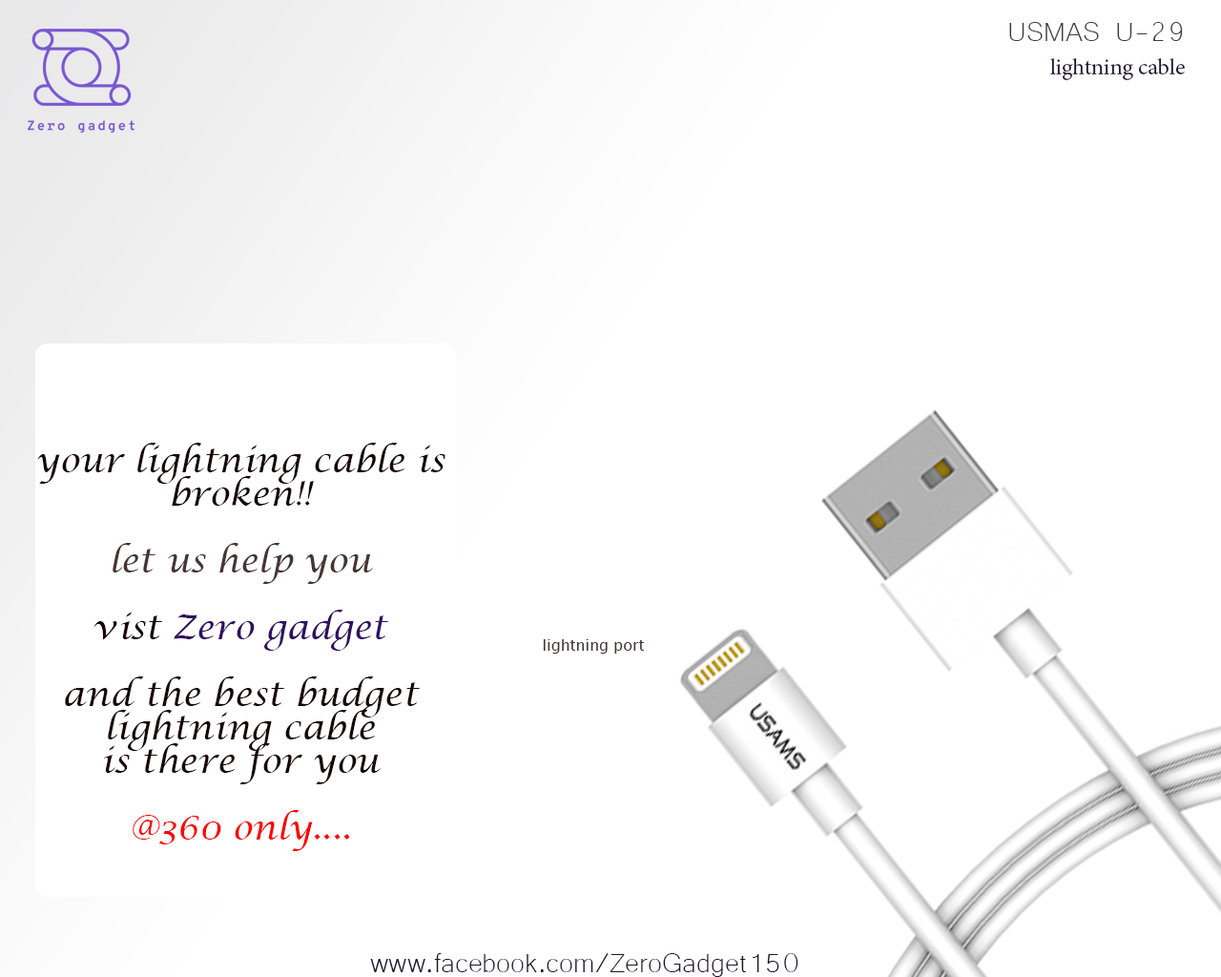
<style>
.page{position:relative;width:1221px;height:977px;background:#ffffff}
.page>*{position:absolute;margin:0}
.t1{font:22.9px/33.4px "MinionPro-Regular";color:#201431}
.t2{font:34.3px/33.4px "Microsoft-Yi-Baiti";color:#3e3d41}
.t3{font:34.3px/33.4px "LucidaCalligraphy-Italic";color:#170606}
.t4{font:34.3px/33.4px "LucidaCalligraphy-Italic";color:#463535}
.t5{font:34.3px/33.4px "LucidaCalligraphy-Italic";color:#310f5f}
.t6{font:34.3px/33.4px "LucidaCalligraphy-Italic";color:#ff0000}
.t7{font:15.3px "LucidaSansUnicode";color:#433535}
.t8{font:34.3px "Microsoft-Yi-Baiti";color:#201431}
</style>
<div class="page">
<p class="t1" style="left:1009px;top:22px;width:176px;height:58px;text-align:right"><span class="t2">USMAS U-29<br></span>lightning cable</p>
<p class="t3" style="left:37px;top:443px;width:408px;height:408px;text-align:center">your lightning cable is <br>broken!! <br><br><span class="t4">let us help you<br></span><br>vist <span class="t5">Zero gadget<br></span><br>and the best budget     lightning cable<br>is there for you<br><br><span class="t6">@360 only....</span></p>
<p class="t7" style="left:543px;top:639px;width:101px;height:14px">lightning port</p>
<p class="t8" style="left:370px;top:953px;width:428px;height:24px">www.facebook.com/ZeroGadget150</p>
</div>
